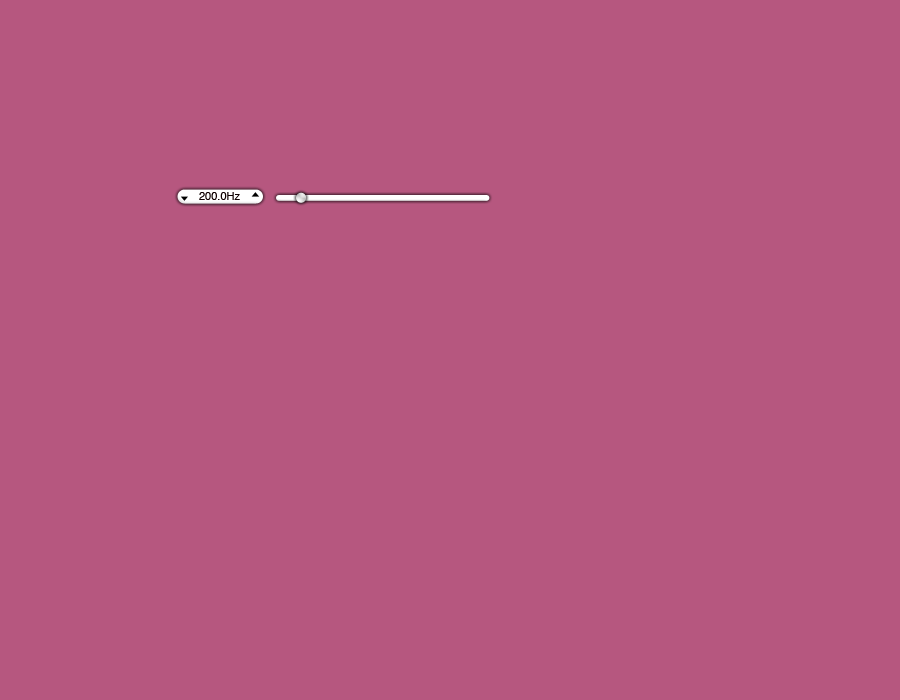
<style>
.page{position:relative;width:900px;height:700px;background:#b6577f}
.page>*{position:absolute;margin:0}
.t1{font:11px "Helvetica";color:#0f0000}
</style>
<div class="page">
<p class="t1" style="left:199px;top:192px;width:41px;height:8px">200.0Hz</p>
</div>
